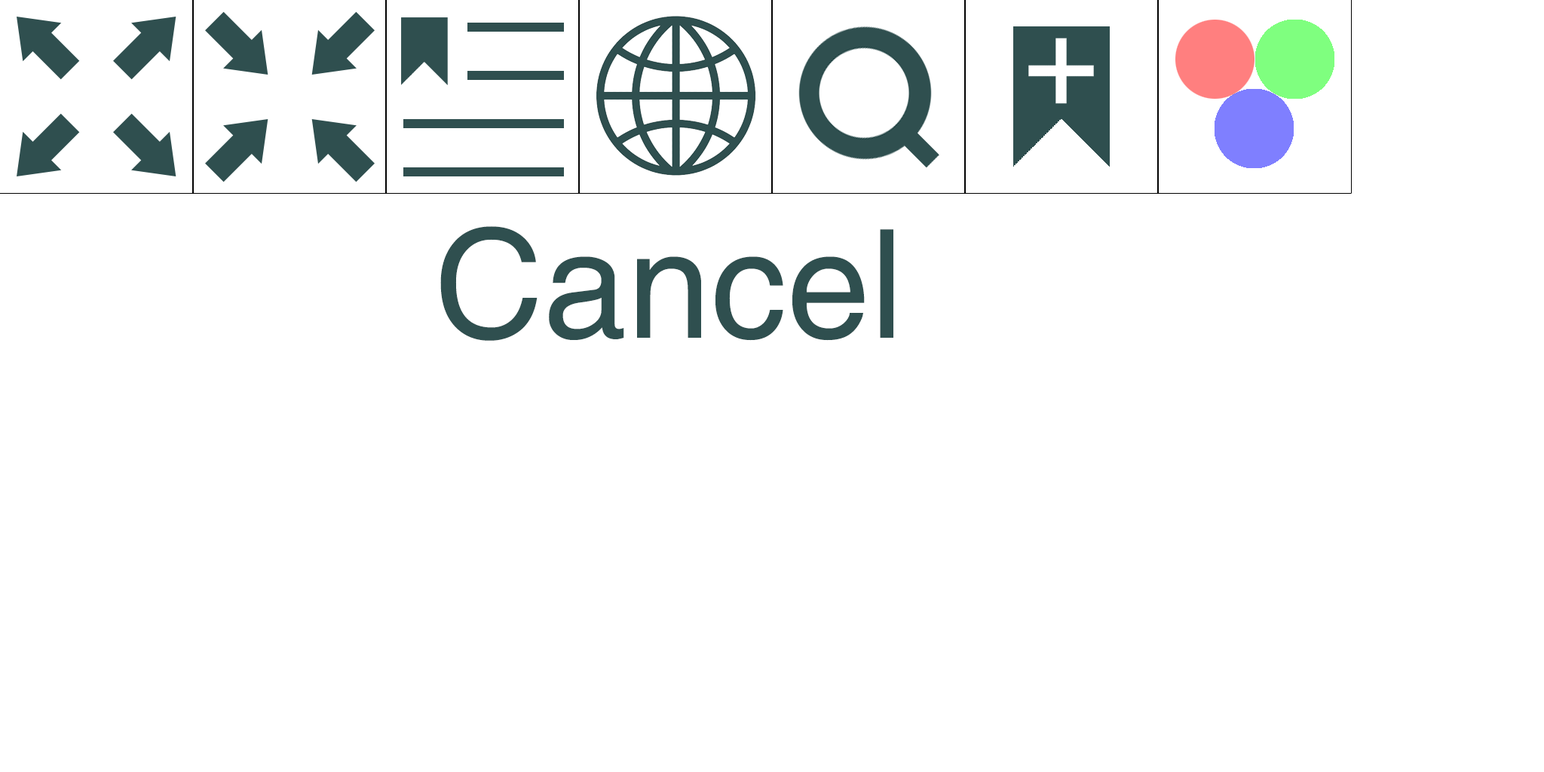
<style>
.page{position:relative;width:1544px;height:772px;background:#ffffff}
.page>*{position:absolute;margin:0}
.t1{font:150.8px "Helvetica";color:#2f4f4f}
</style>
<div class="page">
<p class="t1" style="left:440px;top:226px;width:454px;height:115px">Cancel</p>
</div>
